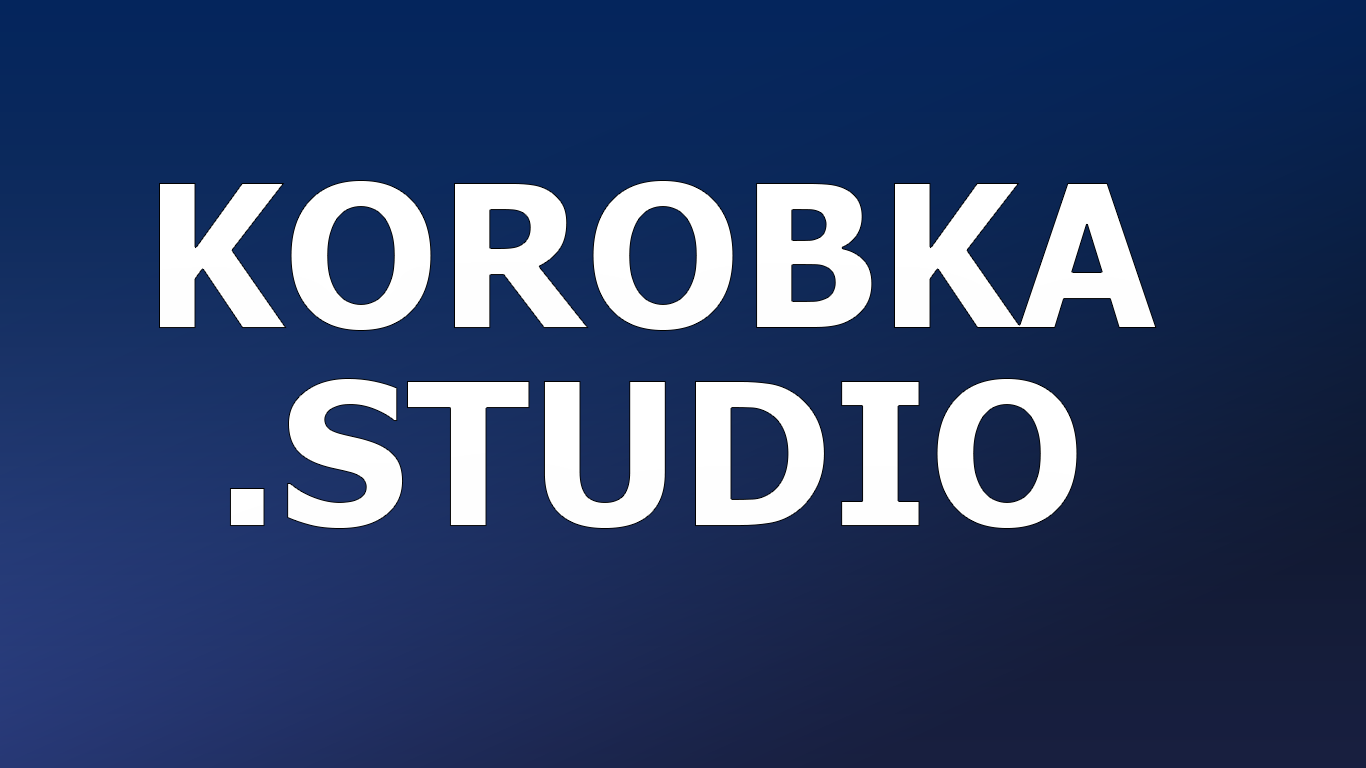
<style>
.page{position:relative;width:1366px;height:768px}
.page>*{position:absolute;margin:0}
.t1{font:200px/198px "Tahoma-Bold";letter-spacing:0.005em;color:#ffffff}
</style>
<div class="page">
<p class="t1" style="left:159px;top:180px;width:998px;height:349px;text-align:center">KOROBKA<br>.STUDIO</p>
</div>
